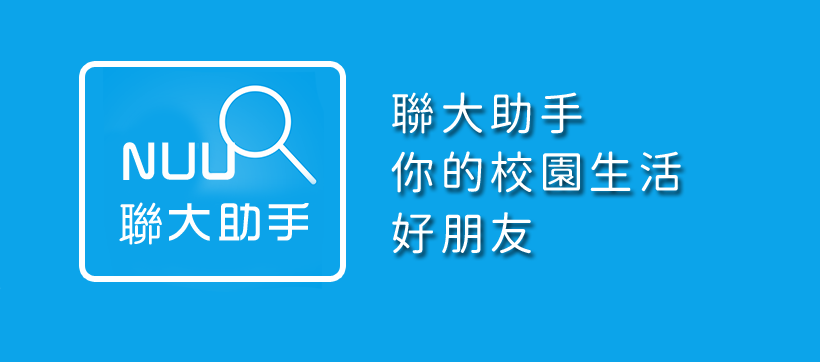
<style>
.page{position:relative;width:820px;height:362px;background:#0ca4ea}
.page>*{position:absolute;margin:0}
.t1{font:45px "GenSenMaruGothicTW-Regular-TTF";letter-spacing:0.1em;color:#ffffff;text-transform:uppercase}
.t2{font:45px/5.1px "GenSenMaruGothicTW-Regular-TTF";letter-spacing:0.1em;color:#ffffff;text-transform:uppercase}
</style>
<div class="page">
<p class="t1" style="left:392px;top:92px;width:190px;height:42px">聯大助手</p>
<p class="t2" style="left:391px;top:151px;width:290px;height:103px">你的校園生活<br><br><br><br><br><br><br><br><br><br><br><br>好朋友</p>
</div>
